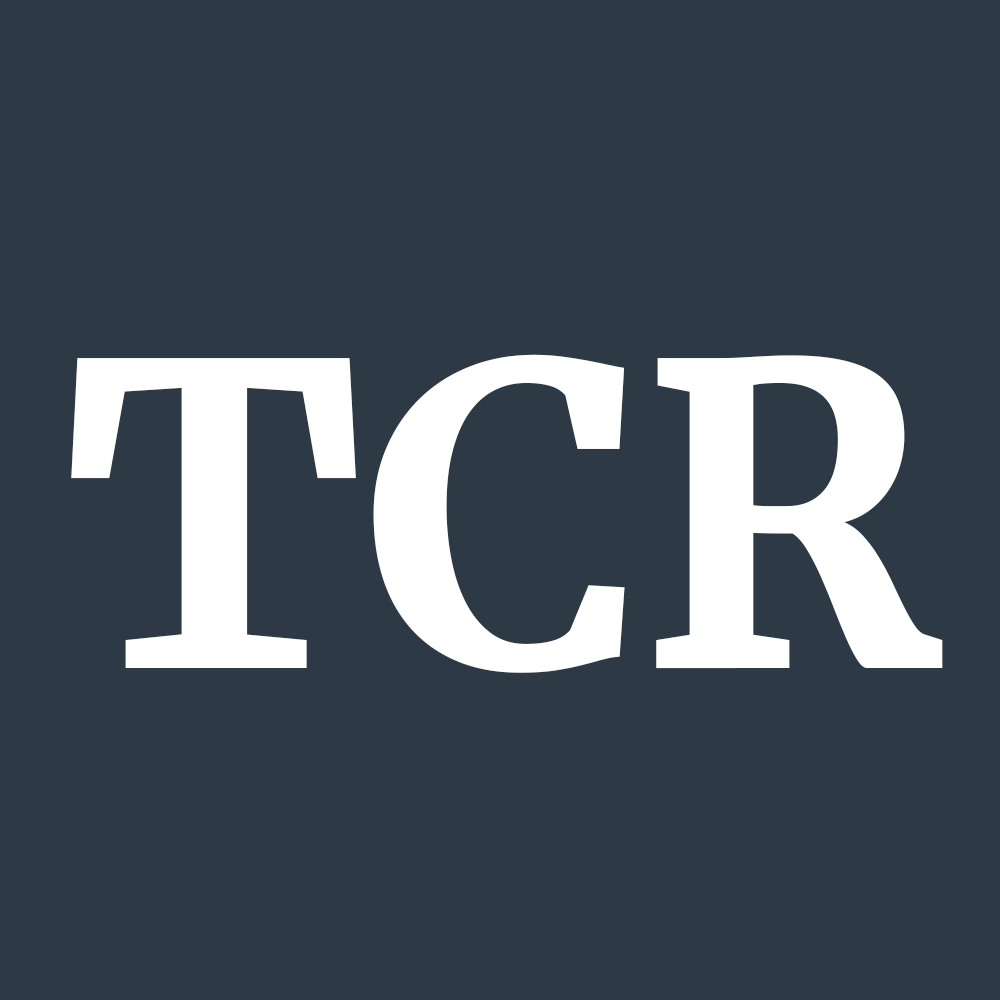
<style>
.page{position:relative;width:1000px;height:1000px;background:#2d3945}
.page>*{position:absolute;margin:0}
.t1{font:416.7px "Merriweather-Bold";color:#ffffff}
</style>
<div class="page">
<p class="t1" style="left:71px;top:354px;width:872px;height:319px">TCR</p>
</div>
